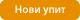
<style>
.page{position:relative;width:80px;height:20px;background:#e68d00}
.page>*{position:absolute;margin:0}
.t1{font:11px "MyriadPro-Semibold";color:#ffffff}
</style>
<div class="page">
<p class="t1" style="left:15px;top:5px;width:51px;height:11px">Нови упит</p>
</div>
